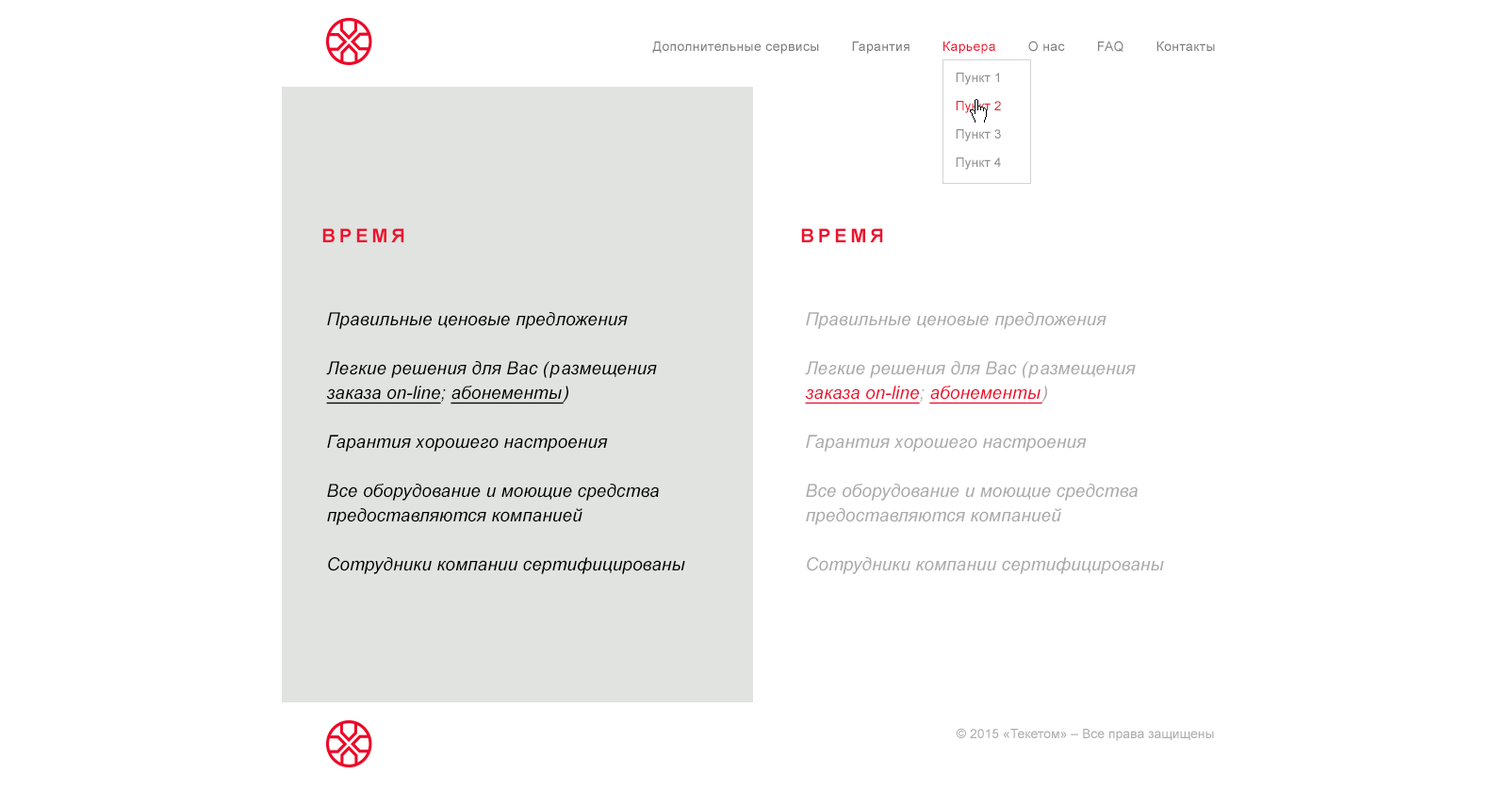
<style>
.page{position:relative;width:1508px;height:791px;background:#ffffff}
.page>*{position:absolute;margin:0}
.t1{font:13.2px "ArialMT";letter-spacing:0.025em;color:#7d7d7d}
.t2{font:13.2px "ArialMT";letter-spacing:0.025em;color:#ed1230}
.t3{font:13.2px "ArialMT";letter-spacing:0.025em;color:#7d7d7d;text-transform:uppercase}
.t4{font:13.2px/28.3px "ArialMT";color:#909090}
.t5{font:13.2px/28.3px "ArialMT";color:#ed223c}
.t6{font:18.8px "Arial-BoldMT";letter-spacing:0.2em;color:#ed1230;text-transform:uppercase}
.t7{font:17.9px/24.5px "Arial-ItalicMT";letter-spacing:0.005em;color:#010101}
.t8{font:17.9px/24.5px "Arial-ItalicMT";letter-spacing:0.075em;color:#010101}
.t9{font:17.9px/24.5px "Arial-ItalicMT";letter-spacing:0.005em;color:#010101;text-decoration:underline}
.t10{font:17.9px/24.5px "Arial-ItalicMT";letter-spacing:0.1em;color:#010101;text-decoration:underline}
.t11{font:17.9px/24.5px "Arial-ItalicMT";letter-spacing:0.1em;color:#010101}
.t12{font:17.9px/24.5px "Arial-ItalicMT";letter-spacing:0.005em;color:#ababab}
.t13{font:17.9px/24.5px "Arial-ItalicMT";letter-spacing:0.075em;color:#ababab}
.t14{font:17.9px/24.5px "Arial-ItalicMT";letter-spacing:0.005em;color:#ed1230;text-decoration:underline}
.t15{font:17.9px/24.5px "Arial-ItalicMT";letter-spacing:0.1em;color:#ed1230;text-decoration:underline}
.t16{font:17.9px/24.5px "Arial-ItalicMT";letter-spacing:0.1em;color:#ababab}
.t17{font:13.2px "ArialMT";color:#acacac}
</style>
<div class="page">
<p class="t1" style="left:652px;top:41px;width:563px;height:13px">Дополнительные сервисы        Гарантия        <span class="t2">Карьера        </span>О нас        <span class="t3">faq        </span>Контакты</p>
<p class="t4" style="left:956px;top:73px;width:45px;height:97px;text-align:center">Пункт 1<br><span class="t5">Пункт 2<br></span>Пункт 3<br>Пункт 4</p>
<p class="t6" style="left:322px;top:228px;width:82px;height:14px">время</p>
<p class="t6" style="left:801px;top:228px;width:82px;height:14px">время</p>
<p class="t7" style="left:326px;top:312px;width:359px;height:262px">Правильные ценовые предложения<br><br>Легкие решения для Вас <span class="t8">(р</span>азмещения <span class="t9">заказа on-line</span>; <span class="t9">абонемент</span><span class="t10">ы</span><span class="t11">) </span> <br><br>Гарантия хорошего настроения <br><br>Все оборудование и моющие средства предоставляются компанией<br><br>Сотрудники компании сертифицированы</p>
<p class="t12" style="left:805px;top:312px;width:359px;height:262px">Правильные ценовые предложения<br><br>Легкие решения для Вас <span class="t13">(р</span>азмещения <span class="t14">заказа on-line</span>; <span class="t14">абонемент</span><span class="t15">ы</span><span class="t16">) </span> <br><br>Гарантия хорошего настроения <br><br>Все оборудование и моющие средства предоставляются компанией<br><br>Сотрудники компании сертифицированы</p>
<p class="t17" style="left:956px;top:728px;width:258px;height:13px">© 2015 «Текетом» – Все права защищены</p>
</div>
